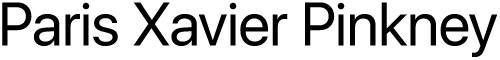
<style>
.page{position:relative;width:500px;height:60px;background:#ffffff}
.page>*{position:absolute;margin:0}
.t1{font:61.1px "SFProDisplay-Regular";color:#000000}
</style>
<div class="page">
<p class="t1" style="left:2px;top:2px;width:496px;height:55px">Paris Xavier Pinkney</p>
</div>
